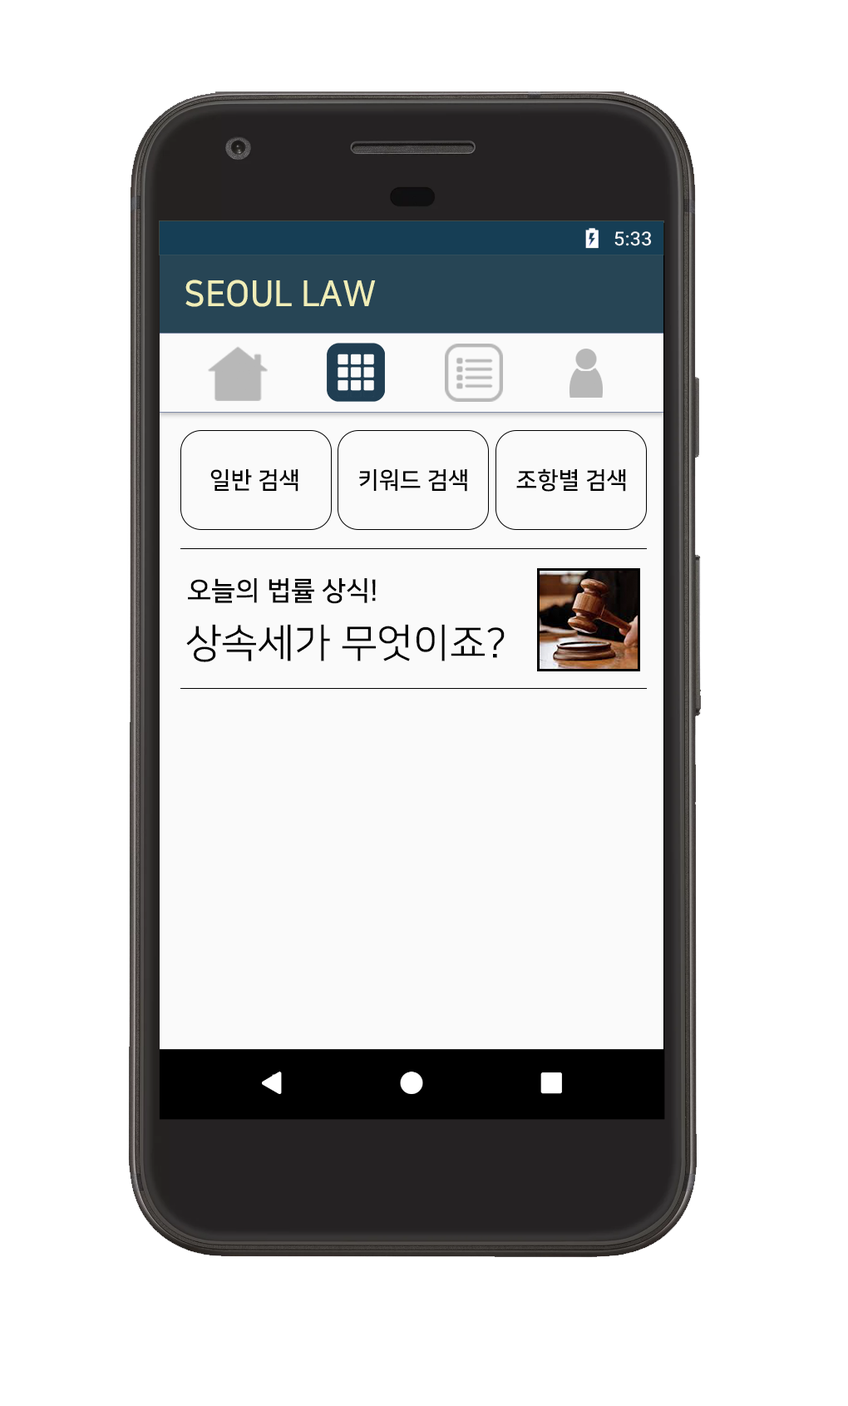
<style>
.page{position:relative;width:848px;height:1406px;background:#ffffff}
.page>*{position:absolute;margin:0}
.t1{font:35.9px "NanumSquareOTFB";color:#f0eeb8;scale:0.96 1}
.t2{font:23.3px "NanumSquareOTFB";color:#000000}
.t3{font:26.6px "NanumSquareOTFB";color:#000000}
.t4{font:39.9px "NanumSquareOTFR";color:#000000}
</style>
<div class="page">
<p class="t1" style="left:185px;top:279px;width:191px;height:28px">SEOUL LAW</p>
<p class="t2" style="left:210px;top:469px;width:89px;height:23px">일반 검색</p>
<p class="t2" style="left:359px;top:469px;width:108px;height:23px">키워드 검색</p>
<p class="t2" style="left:516px;top:468px;width:110px;height:24px">조항별 검색</p>
<p class="t3" style="left:188px;top:578px;width:188px;height:26px">오늘의 법률 상식!</p>
<p class="t4" style="left:186px;top:624px;width:319px;height:38px">상속세가 무엇이죠?</p>
</div>
